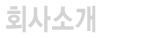
<style>
.page{position:relative;width:168px;height:38px;background:#ffffff}
.page>*{position:absolute;margin:0}
.t1{font:30px "YDIYGO350";letter-spacing:0.025em;color:#d3d3d3;scale:0.82 1}
</style>
<div class="page">
<p class="t1" style="left:6px;top:5px;width:90px;height:28px">회사소개</p>
</div>
